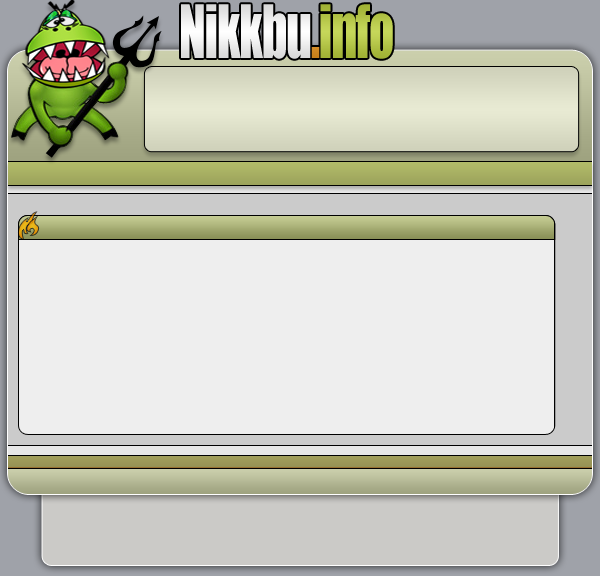
<style>
.page{position:relative;width:600px;height:576px;background:#eeeeee}
.page>*{position:absolute;margin:0}
.t1{font:68px "Impact";letter-spacing:-0.025em;color:#ffffff;scale:0.73 1}
.t2{font:68px "Impact";letter-spacing:-0.025em;color:#ea951e;scale:0.73 1}
.t3{font:68px "Impact";letter-spacing:-0.025em;color:#bcd03d;scale:0.73 1}
</style>
<div class="page">
<p class="t1" style="left:181px;top:4px;width:212px;height:55px">Nikkbu<span class="t2">.</span><span class="t3">info</span></p>
</div>
